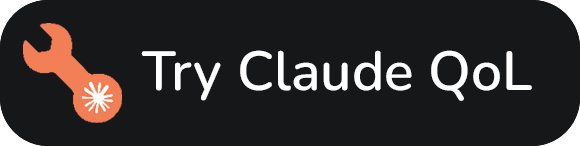
<style>
.page{position:relative;width:580px;height:146px;background:#161719}
.page>*{position:absolute;margin:0}
.t1{font:55px "Nunito-SemiBold";letter-spacing:0.001em;color:#ffffff}
</style>
<div class="page">
<p class="t1" style="left:141px;top:50px;width:391px;height:51px">Try Claude QoL</p>
</div>
